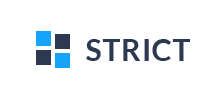
<style>
.page{position:relative;width:215px;height:99px;background:#ffffff}
.page>*{position:absolute;margin:0}
.t1{font:30px "Lato-Bold";letter-spacing:0.025em;color:#2d3950}
</style>
<div class="page">
<p class="t1" style="left:86px;top:39px;width:104px;height:22px">STRICT</p>
</div>
